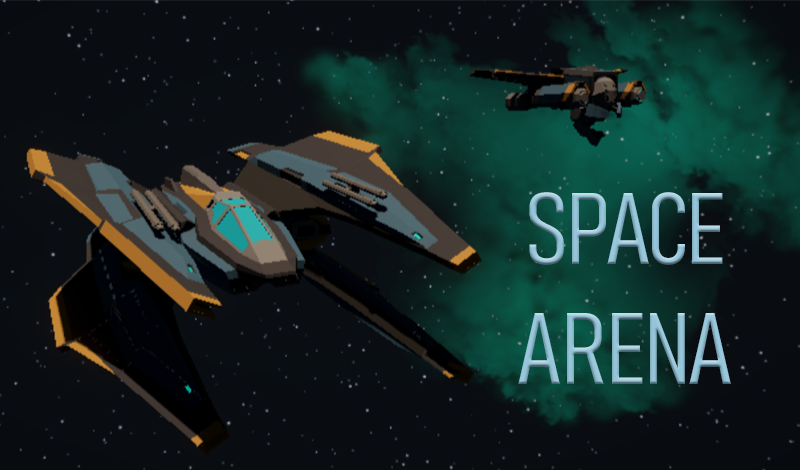
<style>
.page{position:relative;width:800px;height:470px}
.page>*{position:absolute;margin:0}
.t1{font:100px "Bahnschrift-LightCondensed";color:#96c5da}
</style>
<div class="page">
<p class="t1" style="left:518px;top:192px;width:213px;height:192px;text-align:center">SPACE<br>ARENA</p>
</div>
